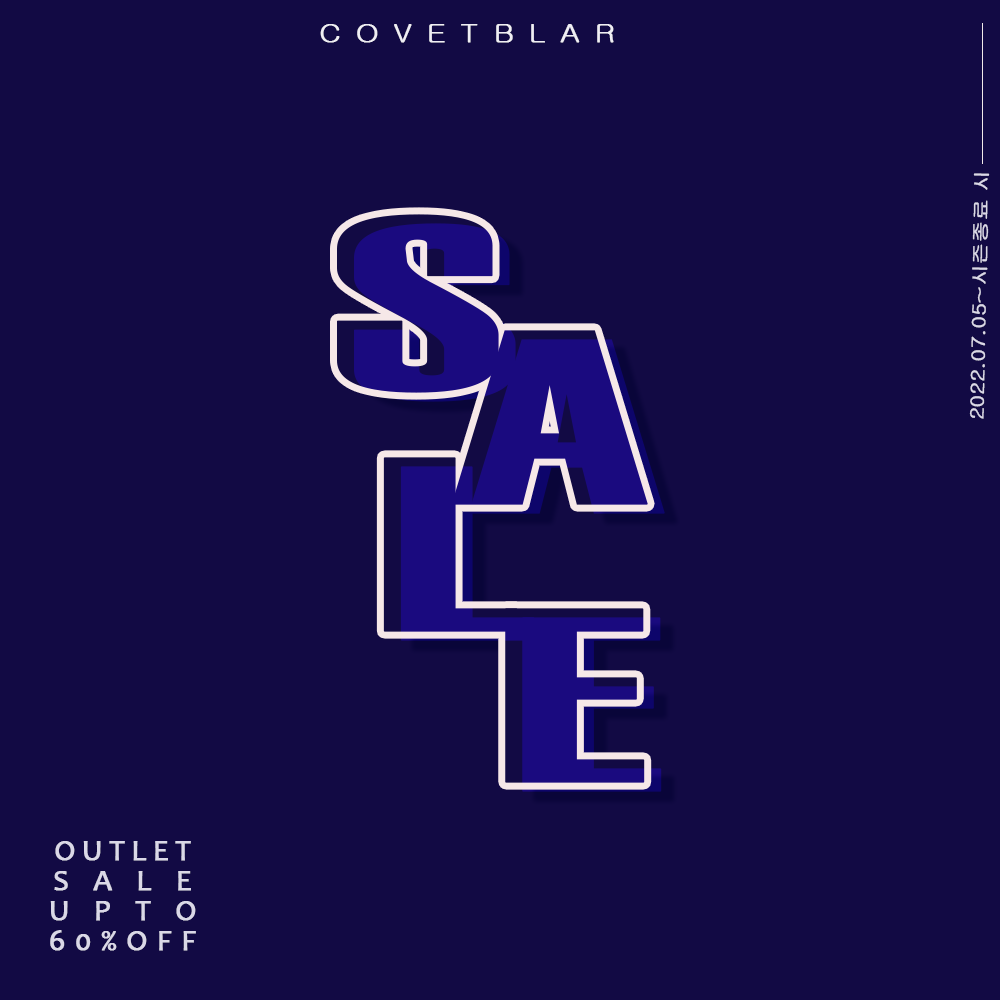
<style>
.page{position:relative;width:1000px;height:1000px;background:#120a44}
.page>*{position:absolute;margin:0}
.t1{font:25.5px "Gulim";letter-spacing:0.5em;color:#efeef4;text-transform:uppercase;font-weight:bold;scale:1.15 1}
.t2{font:18px "Gulim";color:#dad8e7;text-transform:uppercase;font-weight:bold;scale:1.17 1}
.t3{font:247.3px "Haettenschweiler";color:#1a0a7f;text-transform:uppercase;font-weight:bold;scale:1.85 1}
.t4{font:30px/30px "Candara";letter-spacing:0.8em;color:#dad8e7;text-transform:uppercase;font-weight:bold}
.t5{font:30px/30px "Candara";letter-spacing:0.2em;color:#dad8e7;text-transform:uppercase;font-weight:bold}
.t6{font:30px/30px "Candara";letter-spacing:0.3em;color:#dad8e7;text-transform:uppercase;font-weight:bold}
</style>
<div class="page">
<p class="t1" style="left:320px;top:24px;width:294px;height:19px">covetblar</p>
<p class="t2" style="left:969px;top:173px;width:21px;height:246px;rotate:-89deg">2022.07.05~시즌종료 시</p>
<p class="t3" style="left:337px;top:214px;width:162px;height:179px">s</p>
<p class="t3" style="left:451px;top:330px;width:197px;height:175px">a</p>
<p class="t3" style="left:468px;top:339px;width:197px;height:175px">a</p>
<p class="t3" style="left:400px;top:466px;width:135px;height:175px">l</p>
<p class="t3" style="left:505px;top:608px;width:140px;height:175px">e</p>
<p class="t3" style="left:522px;top:617px;width:140px;height:175px">e</p>
<p class="t4" style="left:50px;top:841px;width:146px;height:110px;text-align:center"><span class="t5">outlet<br></span>sale<br>upto<br><span class="t6">60%off</span></p>
</div>
